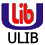
<style>
.page{position:relative;width:45px;height:45px;background:#ffffff}
.page>*{position:absolute;margin:0}
.t1{font:14.6px "Tahoma";color:#000000}
</style>
<div class="page">
<p class="t1" style="left:8px;top:32px;width:31px;height:12px">ULIB</p>
</div>
